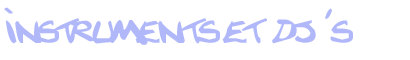
<style>
.page{position:relative;width:410px;height:60px;background:#ffffff}
.page>*{position:absolute;margin:0}
.t1{font:60px "Texted'critureLanfeust";color:#b0b8f9}
</style>
<div class="page">
<p class="t1" style="left:4px;top:7px;width:349px;height:38px">instruments et dj's</p>
</div>
